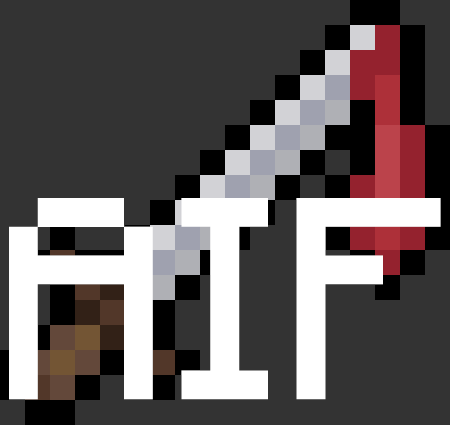
<style>
.page{position:relative;width:450px;height:425px;background:#333333}
.page>*{position:absolute;margin:0}
.t1{font:230px "Minecraftia-Regular";color:#ffffff}
</style>
<div class="page">
<p class="t1" style="left:9px;top:198px;width:432px;height:202px">AIF</p>
</div>
